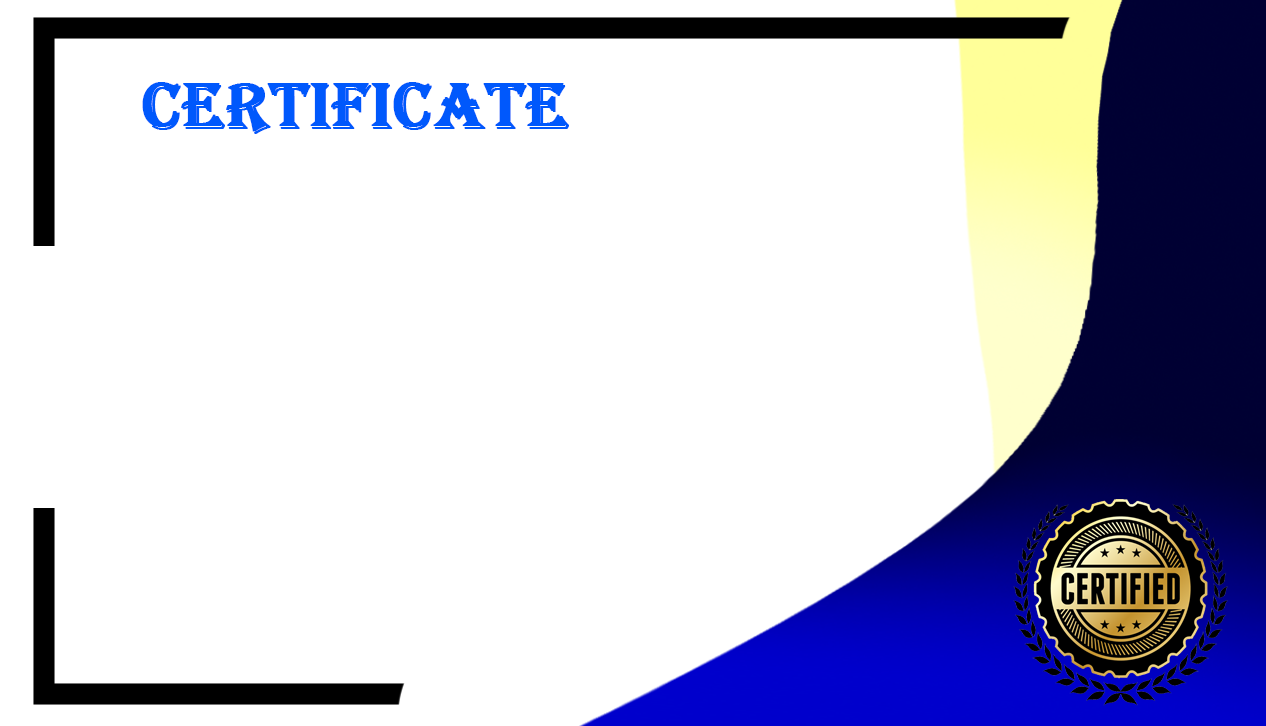
<style>
.page{position:relative;width:1266px;height:726px;background:#ffffff}
.page>*{position:absolute;margin:0}
.t1{font:66.7px "Algerian";color:#0058fc;font-weight:bold}
</style>
<div class="page">
<p class="t1" style="left:142px;top:82px;width:427px;height:52px">certificate</p>
</div>
